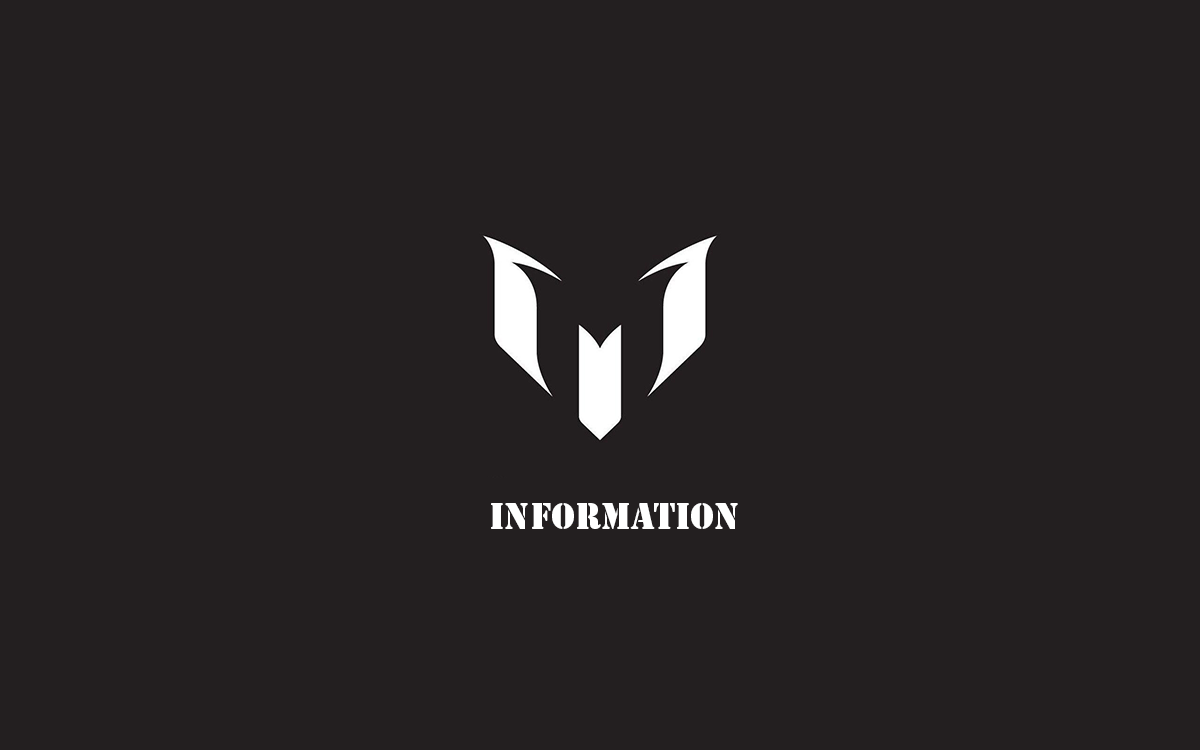
<style>
.page{position:relative;width:1200px;height:750px;background:#231f20}
.page>*{position:absolute;margin:0}
.t1{font:33.8px "StencilStd";color:#ffffff}
.t2{font:14.1px "StencilStd";color:#000000}
</style>
<div class="page">
<p class="t1" style="left:491px;top:503px;width:247px;height:26px"><span class="t2"><br><br></span>       Information</p>
</div>
